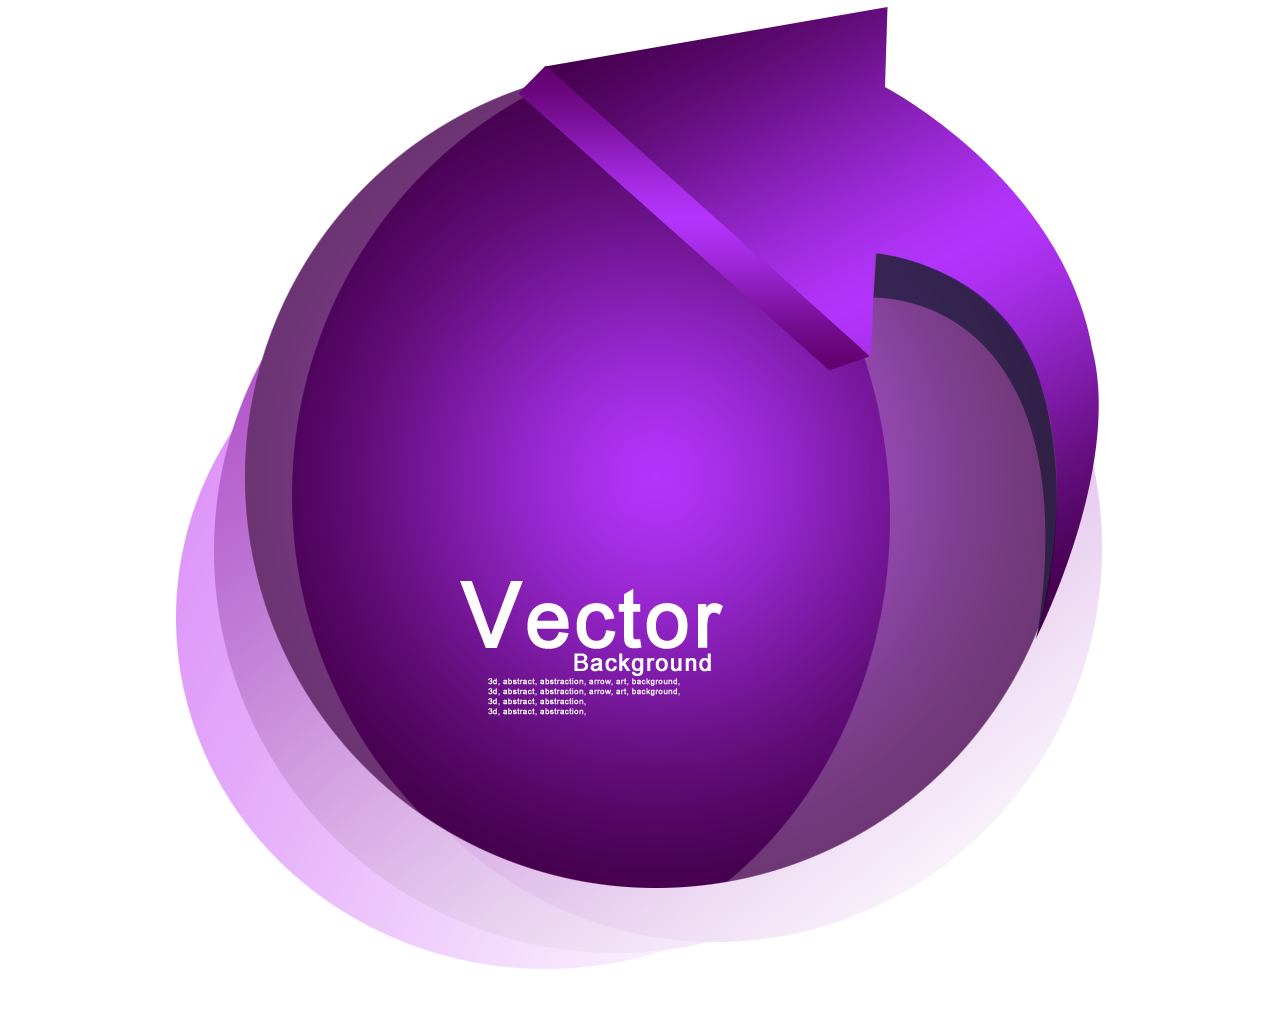
<style>
.page{position:relative;width:1280px;height:1024px;background:#ffffff}
.page>*{position:absolute;margin:0}
.t1{font:80px "ArialMT";letter-spacing:0.025em;color:#ffffff;font-weight:bold}
.t2{font:90px "ArialMT";letter-spacing:0.025em;color:#ffffff;font-weight:bold}
.t3{font:24px "ArialMT";letter-spacing:0.025em;color:#ffffff;font-weight:bold}
.t4{font:8px "ArialMT";letter-spacing:0.025em;color:#ffffff;font-weight:bold}
</style>
<div class="page">
<p class="t1" style="left:460px;top:581px;width:263px;height:68px"><span class="t2">V</span>ector</p>
<p class="t3" style="left:574px;top:653px;width:137px;height:23px">Background</p>
<p class="t4" style="left:488px;top:678px;width:192px;height:8px">3d, abstract, abstraction, arrow, art, background,</p>
<p class="t4" style="left:488px;top:688px;width:192px;height:8px">3d, abstract, abstraction, arrow, art, background,</p>
<p class="t4" style="left:488px;top:698px;width:98px;height:8px">3d, abstract, abstraction,</p>
<p class="t4" style="left:488px;top:708px;width:98px;height:8px">3d, abstract, abstraction,</p>
</div>
